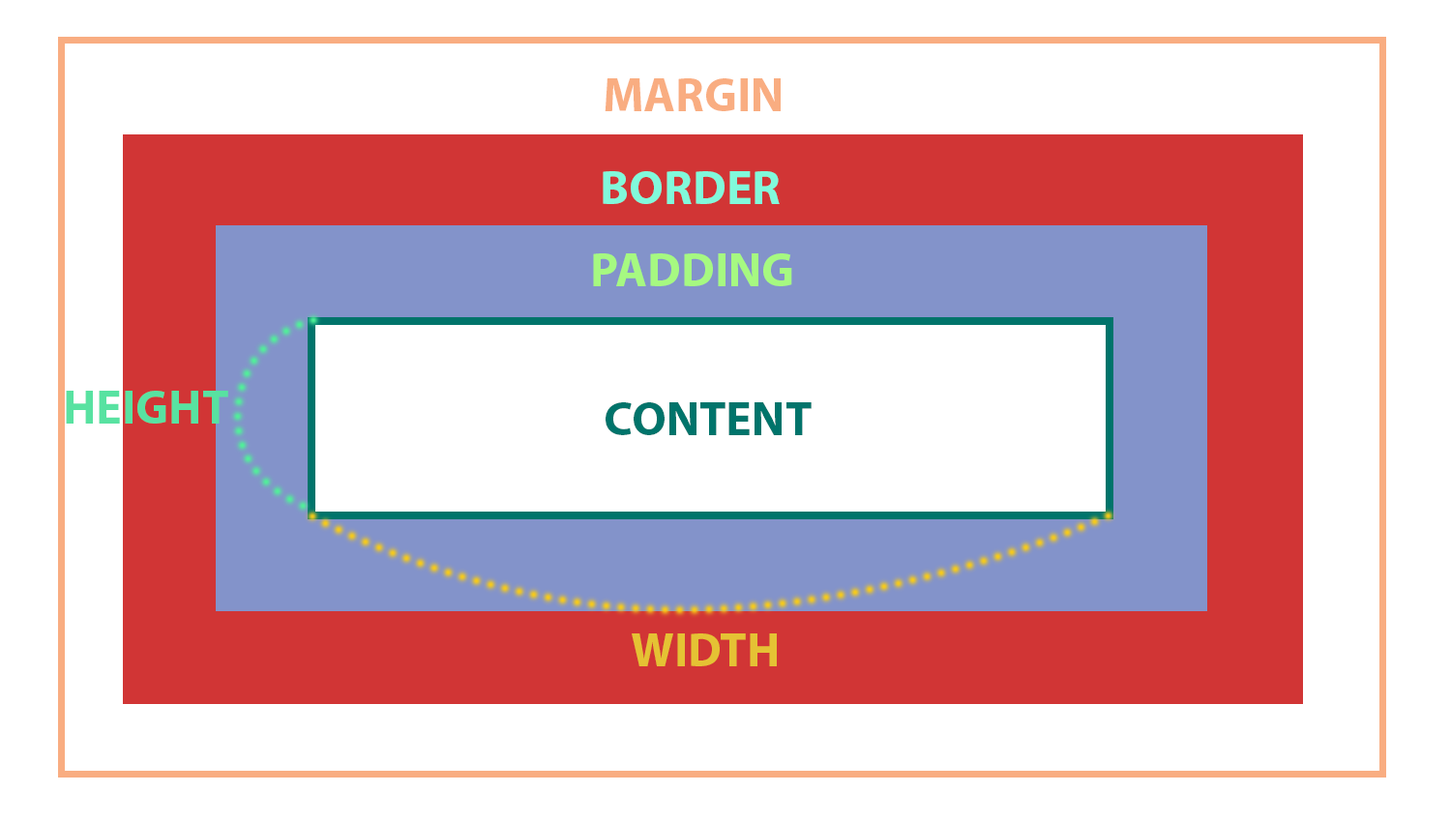
<style>
.page{position:relative;width:1451px;height:822px;background:#ffffff}
.page>*{position:absolute;margin:0}
.t1{font:48.4px "MyriadHebrew-Bold";color:#f9ad81}
.t2{font:48.4px "MyriadHebrew-Bold";color:#81f9db}
.t3{font:48.4px "MyriadHebrew-Bold";color:#a6f981}
.t4{font:48.4px "MyriadHebrew-Bold";color:#58e2a1}
.t5{font:48.4px "MyriadHebrew-Bold";color:#00746b}
.t6{font:48.4px "MyriadHebrew-Bold";color:#e5c234}
</style>
<div class="page">
<p class="t1" style="left:604px;top:78px;width:176px;height:33px">MARGIN</p>
<p class="t2" style="left:602px;top:171px;width:177px;height:33px">BORDER</p>
<p class="t3" style="left:593px;top:253px;width:199px;height:33px">PADDING</p>
<p class="t4" style="left:66px;top:391px;width:162px;height:33px">HEIGHT</p>
<p class="t5" style="left:605px;top:402px;width:206px;height:33px">CONTENT</p>
<p class="t6" style="left:632px;top:633px;width:145px;height:33px">WIDTH</p>
</div>
